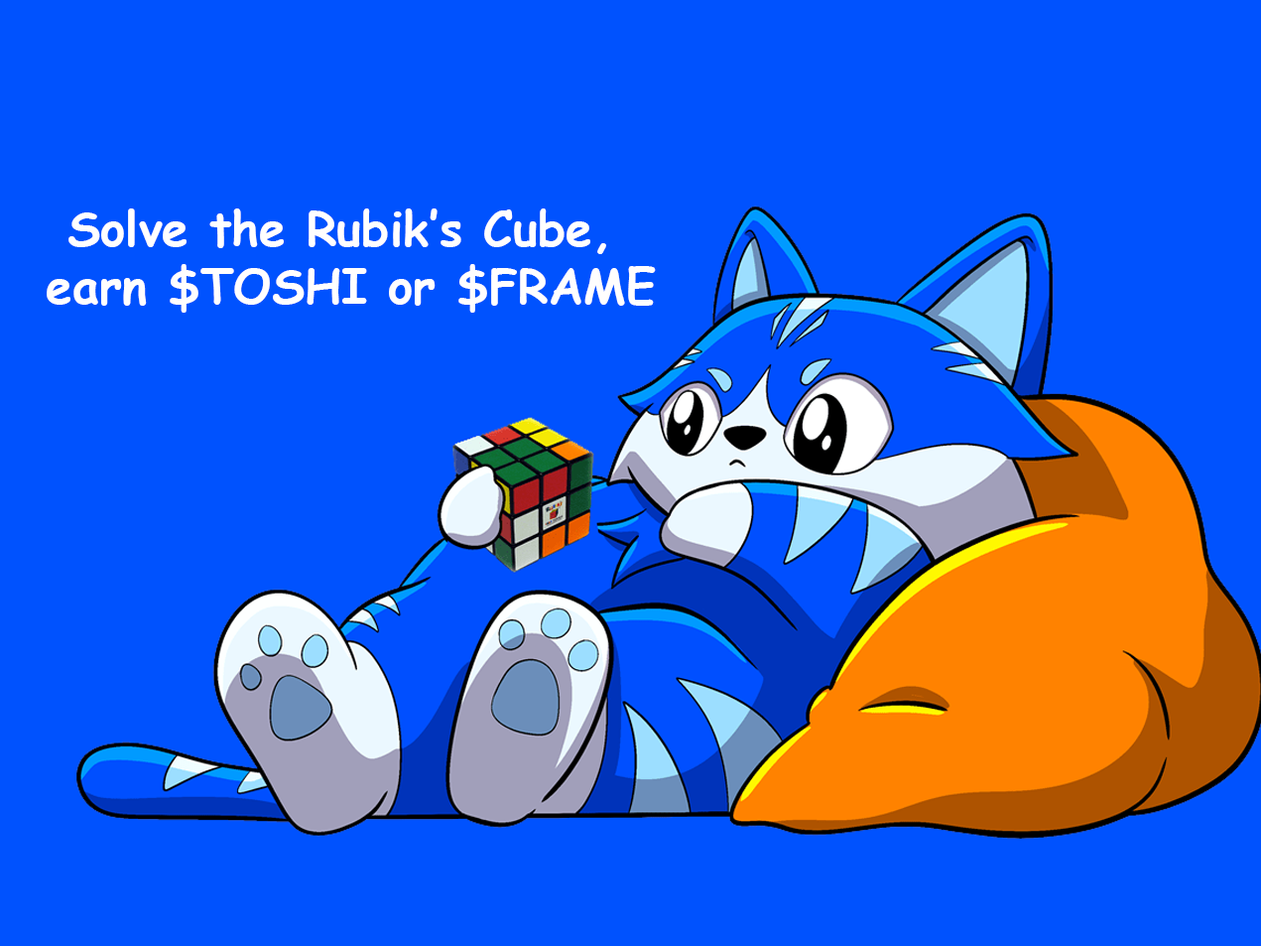
<style>
.page{position:relative;width:1261px;height:946px;background:#0052fe}
.page>*{position:absolute;margin:0}
.t1{font:47.6px "ComicSansMS-Bold";color:#fffefe}
</style>
<div class="page">
<p class="t1" style="left:47px;top:208px;width:609px;height:105px;text-align:center">Solve the Rubik’s Cube, <br>earn $TOSHI or $FRAME</p>
</div>
